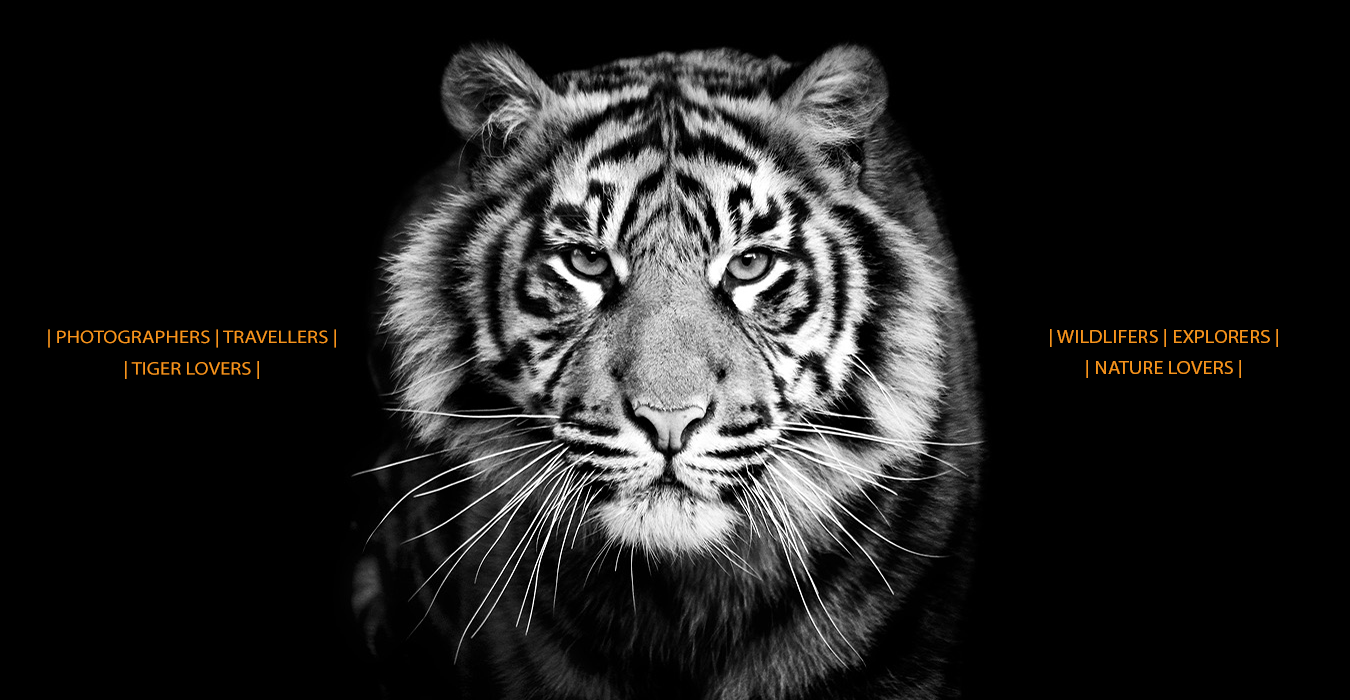
<style>
.page{position:relative;width:1350px;height:700px;background:#000000}
.page>*{position:absolute;margin:0}
.t1{font:18px/31.5px "MyriadPro-Regular";color:#f7941d;scale:1.14 1}
.t2{font:15.8px/31.5px "MyriadPro-Bold";color:#f7941d;scale:1.14 1}
</style>
<div class="page">
<p class="t1" style="left:48px;top:329px;width:288px;height:50px;text-align:center">| PHOTOGRAPHERS | TRAVELLERS | <br>| TIGER LOVERS |<br><span class="t2"><br><br><br><br><br><br>TIGER LOVERS</span></p>
<p class="t1" style="left:1050px;top:329px;width:228px;height:49px;text-align:center">| WILDLIFERS | EXPLORERS | <br>| NATURE LOVERS |</p>
</div>
